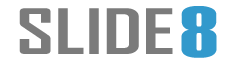
<style>
.page{position:relative;width:240px;height:60px;background:#ffffff}
.page>*{position:absolute;margin:0}
.t1{font:72px "Haettenschweiler";color:#3299cc;scale:1.4 1}
.t2{font:60px "AgencyFB-Bold";color:#7b7b7b;scale:1.4 1}
</style>
<div class="page">
<p class="t1" style="left:181px;top:6px;width:36px;height:52px">8</p>
<p class="t2" style="left:19px;top:8px;width:154px;height:46px">SLIDE</p>
</div>
